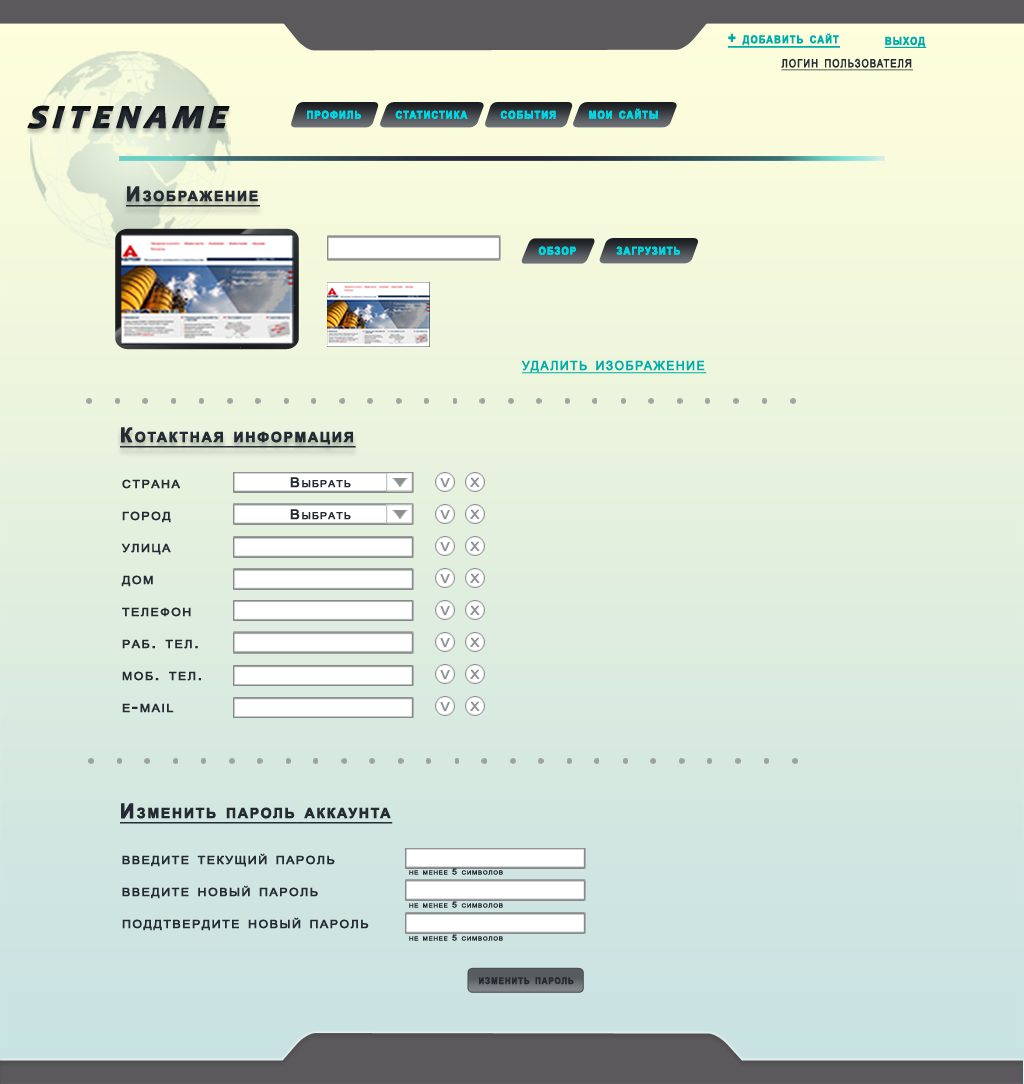
<style>
.page{position:relative;width:1024px;height:1084px}
.page>*{position:absolute;margin:0}
.t1{font:15.3px "Arial-BoldMT";letter-spacing:0.1em;color:#00abab;font-variant:small-caps;font-weight:bold;text-decoration:underline;scale:0.86 1}
.t2{font:16.2px "ArialMT";letter-spacing:0.1em;color:#252b33;font-variant:small-caps;font-weight:bold;text-decoration:underline;scale:0.81 1}
.t3{font:40px "Candara-BoldItalic";letter-spacing:0.1em;color:#252b33;font-variant:small-caps;font-weight:bold;font-style:italic}
.t4{font:15.3px "Arial-BoldMT";letter-spacing:0.1em;color:#00d7e3;font-variant:small-caps;font-weight:bold;scale:0.86 1}
.t5{font:20px "Arial-BoldMT";letter-spacing:0.1em;color:#252b33;font-variant:small-caps;font-weight:bold;text-decoration:underline}
.t6{font:18px "ArialMT";letter-spacing:0.1em;color:#00abab;font-variant:small-caps;font-weight:bold;text-decoration:underline;scale:0.96 1}
.t7{font:16px "ArialMT";letter-spacing:0.1em;color:#252b33;font-variant:small-caps;font-weight:bold;scale:1.1 1}
.t8{font:13.3px "ArialMT";letter-spacing:0.1em;color:#252b33;font-variant:small-caps;font-weight:bold;scale:1.1 1}
.t9{font:17.3px "ArialMT";letter-spacing:0.1em;color:#8b9090;font-variant:small-caps;font-weight:bold;scale:1.1 1}
.t10{font:8px "ArialMT";letter-spacing:0.1em;color:#252b33;font-variant:small-caps;font-weight:bold;scale:1.1 1}
.t11{font:13px "Arial-BoldMT";letter-spacing:0.1em;color:#252b33;font-variant:small-caps;font-weight:bold;scale:0.86 1}
</style>
<div class="page">
<p class="t1" style="left:728px;top:33px;width:112px;height:15px">+ добавить сайт</p>
<p class="t1" style="left:884px;top:36px;width:43px;height:12px">выход</p>
<p class="t2" style="left:781px;top:58px;width:132px;height:13px">логин пользователя</p>
<p class="t3" style="left:27px;top:105px;width:203px;height:24px">sitename</p>
<p class="t4" style="left:307px;top:110px;width:54px;height:9px">профиль</p>
<p class="t4" style="left:307px;top:110px;width:54px;height:9px">профиль</p>
<p class="t4" style="left:395px;top:110px;width:73px;height:9px">статистика</p>
<p class="t4" style="left:395px;top:110px;width:73px;height:9px">статистика</p>
<p class="t4" style="left:500px;top:110px;width:56px;height:9px">события</p>
<p class="t4" style="left:500px;top:110px;width:56px;height:9px">события</p>
<p class="t4" style="left:589px;top:108px;width:69px;height:11px">мои сайты</p>
<p class="t4" style="left:589px;top:108px;width:69px;height:11px">мои сайты</p>
<p class="t5" style="left:126px;top:186px;width:134px;height:21px">Изображение</p>
<p class="t4" style="left:538px;top:246px;width:38px;height:9px">обзор</p>
<p class="t4" style="left:538px;top:246px;width:38px;height:9px">обзор</p>
<p class="t4" style="left:616px;top:246px;width:64px;height:9px">загрузить</p>
<p class="t4" style="left:616px;top:246px;width:64px;height:9px">загрузить</p>
<p class="t6" style="left:521px;top:360px;width:186px;height:14px">удалить изображение</p>
<p class="t5" style="left:120px;top:427px;width:236px;height:21px">Котактная информация</p>
<p class="t7" style="left:122px;top:479px;width:58px;height:10px">страна</p>
<p class="t8" style="left:290px;top:477px;width:61px;height:11px">Выбрать</p>
<p class="t9" style="left:440px;top:478px;width:10px;height:10px">v</p>
<p class="t9" style="left:470px;top:477px;width:10px;height:10px">x</p>
<p class="t8" style="left:290px;top:509px;width:61px;height:11px">Выбрать</p>
<p class="t9" style="left:440px;top:510px;width:10px;height:10px">v</p>
<p class="t9" style="left:470px;top:509px;width:10px;height:10px">x</p>
<p class="t7" style="left:122px;top:511px;width:49px;height:12px">город</p>
<p class="t7" style="left:121px;top:543px;width:50px;height:12px">улица</p>
<p class="t9" style="left:440px;top:542px;width:10px;height:10px">v</p>
<p class="t9" style="left:470px;top:541px;width:10px;height:10px">x</p>
<p class="t7" style="left:121px;top:575px;width:32px;height:12px">дом</p>
<p class="t9" style="left:440px;top:574px;width:10px;height:10px">v</p>
<p class="t9" style="left:470px;top:573px;width:10px;height:10px">x</p>
<p class="t9" style="left:440px;top:606px;width:10px;height:10px">v</p>
<p class="t9" style="left:470px;top:605px;width:10px;height:10px">x</p>
<p class="t7" style="left:122px;top:607px;width:69px;height:10px">телефон</p>
<p class="t7" style="left:122px;top:639px;width:76px;height:10px">раб. тел.</p>
<p class="t9" style="left:440px;top:638px;width:10px;height:10px">v</p>
<p class="t9" style="left:470px;top:637px;width:10px;height:10px">x</p>
<p class="t7" style="left:122px;top:671px;width:79px;height:10px">моб. тел.</p>
<p class="t9" style="left:440px;top:670px;width:10px;height:10px">v</p>
<p class="t9" style="left:470px;top:669px;width:10px;height:10px">x</p>
<p class="t9" style="left:440px;top:702px;width:10px;height:10px">v</p>
<p class="t9" style="left:470px;top:701px;width:10px;height:10px">x</p>
<p class="t7" style="left:122px;top:703px;width:52px;height:10px">e-mail</p>
<p class="t5" style="left:120px;top:803px;width:273px;height:21px">Изменить пароль аккаунта</p>
<p class="t7" style="left:122px;top:853px;width:213px;height:14px">введите текущий пароль</p>
<p class="t10" style="left:409px;top:868px;width:94px;height:7px">не менее 5 символов</p>
<p class="t7" style="left:122px;top:885px;width:196px;height:14px">введите новый пароль</p>
<p class="t10" style="left:409px;top:901px;width:94px;height:7px">не менее 5 символов</p>
<p class="t7" style="left:122px;top:917px;width:247px;height:14px">поддтвердите новый пароль</p>
<p class="t10" style="left:409px;top:934px;width:94px;height:7px">не менее 5 символов</p>
<p class="t11" style="left:479px;top:977px;width:95px;height:8px">изменить пароль</p>
</div>
